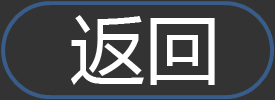
<style>
.page{position:relative;width:275px;height:100px;background:#333333}
.page>*{position:absolute;margin:0}
.t1{font:75px "MicrosoftYaHei";color:#ffffff}
</style>
<div class="page">
<p class="t1" style="left:71px;top:15px;width:144px;height:70px">返回</p>
</div>
